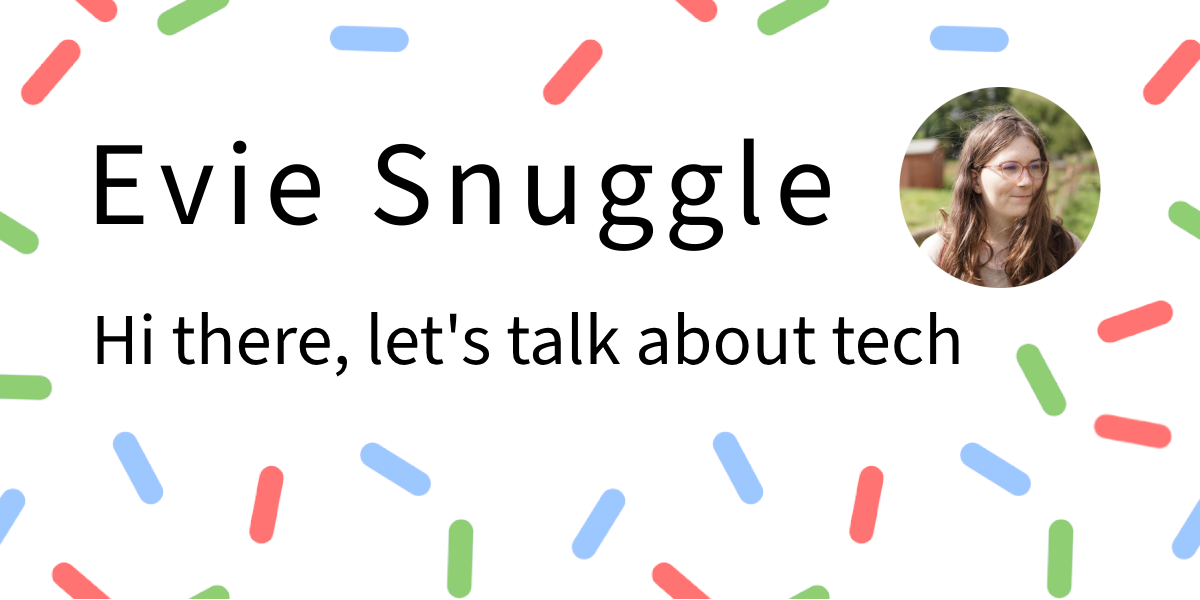
<style>
.page{position:relative;width:1200px;height:600px;background:#ffffff}
.page>*{position:absolute;margin:0}
.t1{font:73px "SourceSans3-Regular";color:#000000}
</style>
<div class="page">
<p class="t1" style="left:97px;top:312px;width:862px;height:65px">Hi there, let's talk about tech</p>
</div>
